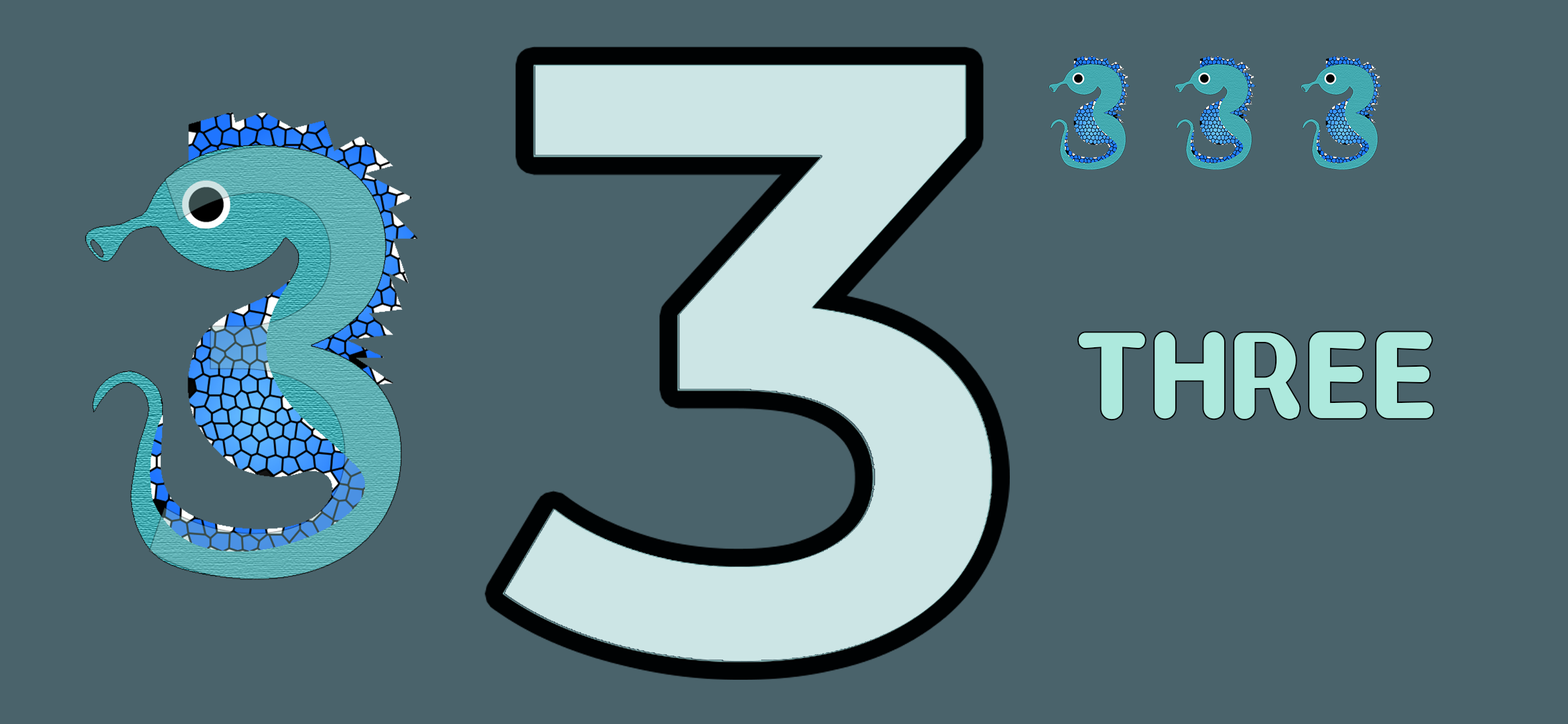
<style>
.page{position:relative;width:1568px;height:724px;background:#4a636b}
.page>*{position:absolute;margin:0}
.t1{font:139.6px "Dyuthi";color:#ade9dd}
</style>
<div class="page">
<p class="t1" style="left:1078px;top:332px;width:355px;height:87px">THREE</p>
</div>
